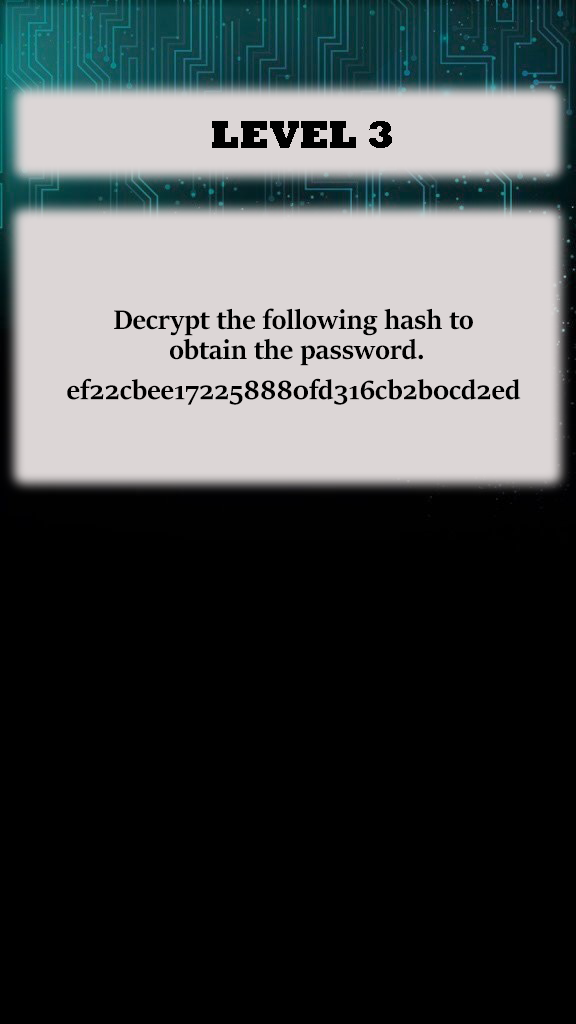
<style>
.page{position:relative;width:576px;height:1024px;background:#000000}
.page>*{position:absolute;margin:0}
.t1{font:40px "Rockwell-ExtraBold";color:#000000}
.t2{font:30px/10px "SitkaBanner-Bold";color:#000000}
</style>
<div class="page">
<p class="t1" style="left:212px;top:121px;width:180px;height:27px">LEVEL 3</p>
<p class="t2" style="left:67px;top:308px;width:454px;height:97px;text-align:center">Decrypt the following hash to<br><br><br> obtain the password.<br><br><br><br>ef22cbee172258880fd316cb2b0cd2ed</p>
</div>
